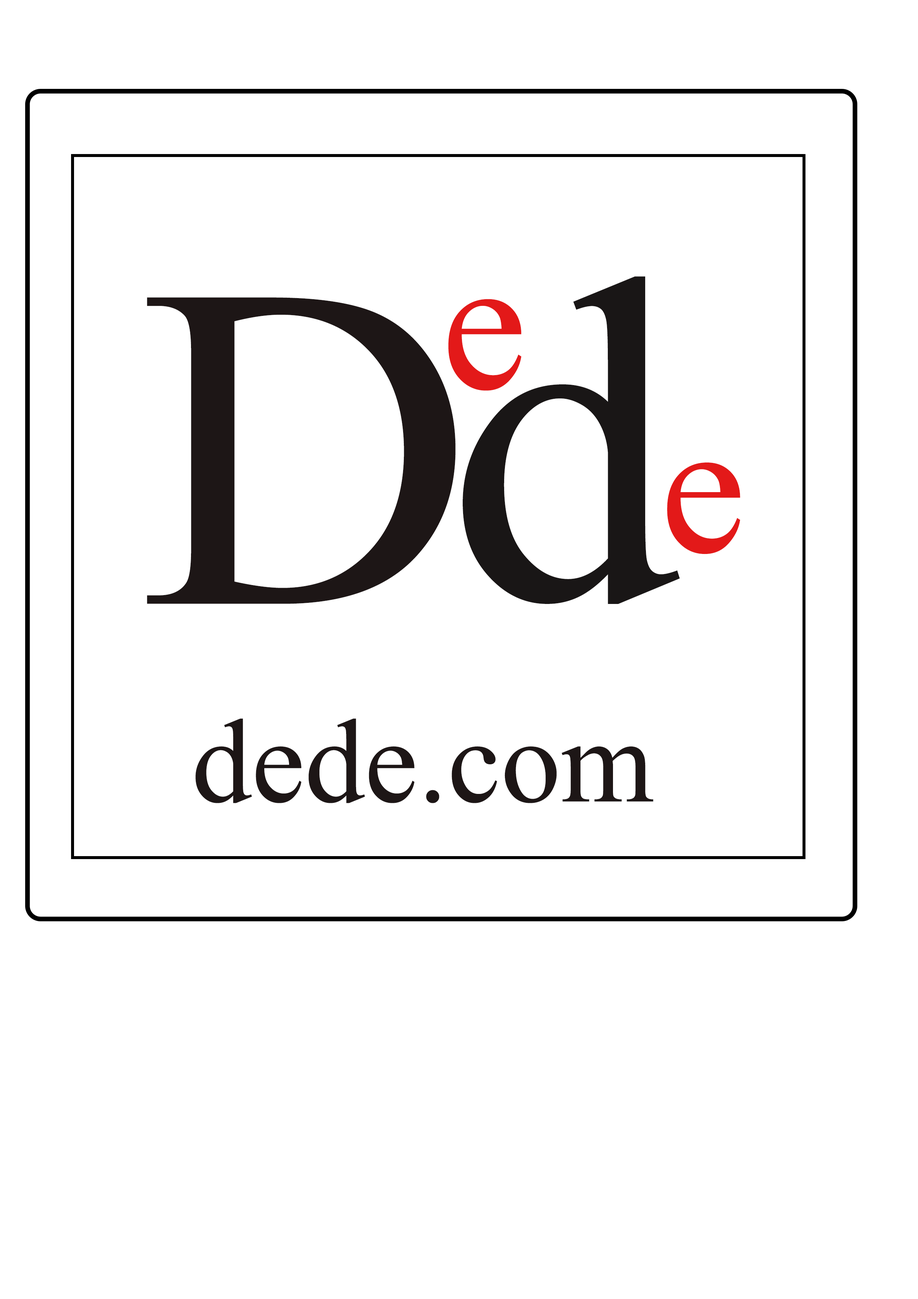
<style>
.page{position:relative;width:918px;height:1299px;background:#ffffff}
.page>*{position:absolute;margin:0}
.t1{font:462.4px "TimesNewRomanPSMT";color:#191616}
.t2{font:462.4px "TimesNewRomanPSMT";color:#1d1616}
.t3{font:192.7px "TimesNewRomanPSMT";color:#e31919}
.t4{font:119.2px "TimesNewRomanPSMT";color:#1d1616}
</style>
<div class="page">
<p class="t1" style="left:463px;top:276px;width:217px;height:328px">d</p>
<p class="t2" style="left:147px;top:297px;width:309px;height:307px">D</p>
<p class="t3" style="left:448px;top:299px;width:74px;height:92px">e</p>
<p class="t3" style="left:667px;top:462px;width:73px;height:92px">e</p>
<p class="t4" style="left:195px;top:718px;width:458px;height:85px">dede.com</p>
</div>
